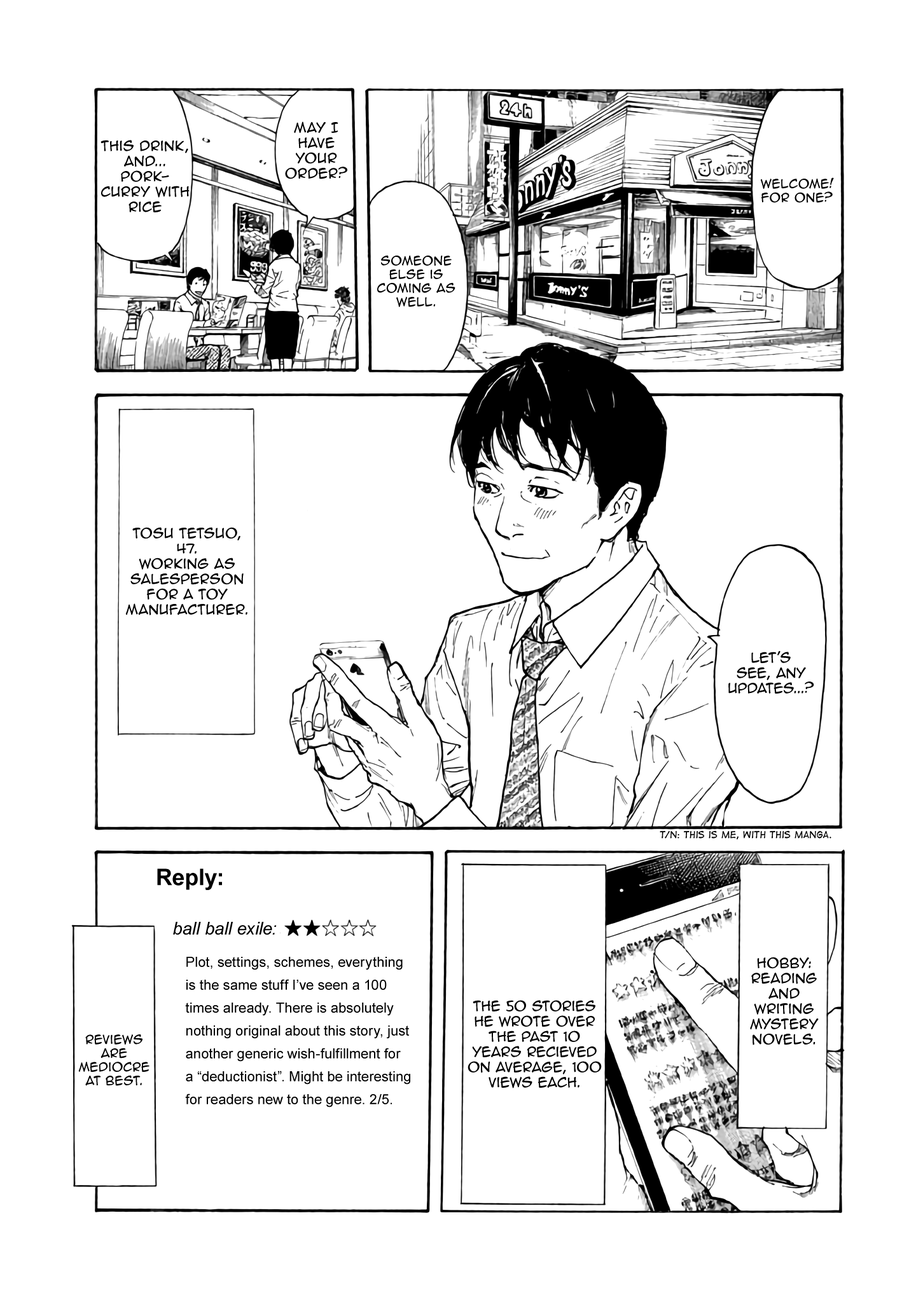
<style>
.page{position:relative;width:916px;height:1302px;background:#ffffff}
.page>*{position:absolute;margin:0}
.t1{font:12.7px "AnimeAce2.0BB";color:#000000}
.t2{font:11.4px "AnimeAce2.0BB";color:#000000}
.t3{font:8.9px "DigitalStrip";color:#000000}
.t4{font:22.9px "Arial-BoldMT";color:#000000}
.t5{font:17.8px "Arial-ItalicMT";color:#000000}
.t6{font:14px/22.9px "ArialMT";color:#000000}
</style>
<div class="page">
<p class="t1" style="left:285px;top:121px;width:62px;height:58px;text-align:center">May I have your order?</p>
<p class="t1" style="left:100px;top:140px;width:89px;height:72px;text-align:center">This drink, and... pork-<br>curry with rice</p>
<p class="t2" style="left:760px;top:177px;width:74px;height:26px;text-align:center">Welcome! For one?</p>
<p class="t2" style="left:377px;top:255px;width:78px;height:52px;text-align:center">Someone else is coming as well.</p>
<p class="t1" style="left:125px;top:527px;width:122px;height:89px;text-align:center">Tosu Tetsuo, 47. <br>Working as salesperson for a toy manufacturer.</p>
<p class="t1" style="left:728px;top:651px;width:86px;height:43px;text-align:center">Let’s see, any updates...?</p>
<p class="t3" style="left:659px;top:831px;width:172px;height:9px">^T/N: This is me, with this manga.</p>
<p class="t4" style="left:157px;top:869px;width:65px;height:21px">Reply:</p>
<p class="t5" style="left:173px;top:922px;width:104px;height:13px">ball ball exile:</p>
<p class="t6" style="left:185px;top:957px;width:225px;height:151px">Plot, settings, schemes, everything is the same stuff I’ve seen a 100 times already. There is absolutely nothing original about this story, just another generic wish-fulfillment for a “deductionist”. Might be interesting for readers new to the genre. 2/5.</p>
<p class="t1" style="left:750px;top:957px;width:68px;height:88px;text-align:center">Hobby: Reading and writing mystery novels.</p>
<p class="t1" style="left:467px;top:1000px;width:135px;height:89px;text-align:center">The 50 stories he wrote over the past 10 years recieved on average, 100 views each.</p>
<p class="t2" style="left:78px;top:1035px;width:71px;height:51px;text-align:center">Reviews are mediocre at best.</p>
</div>
